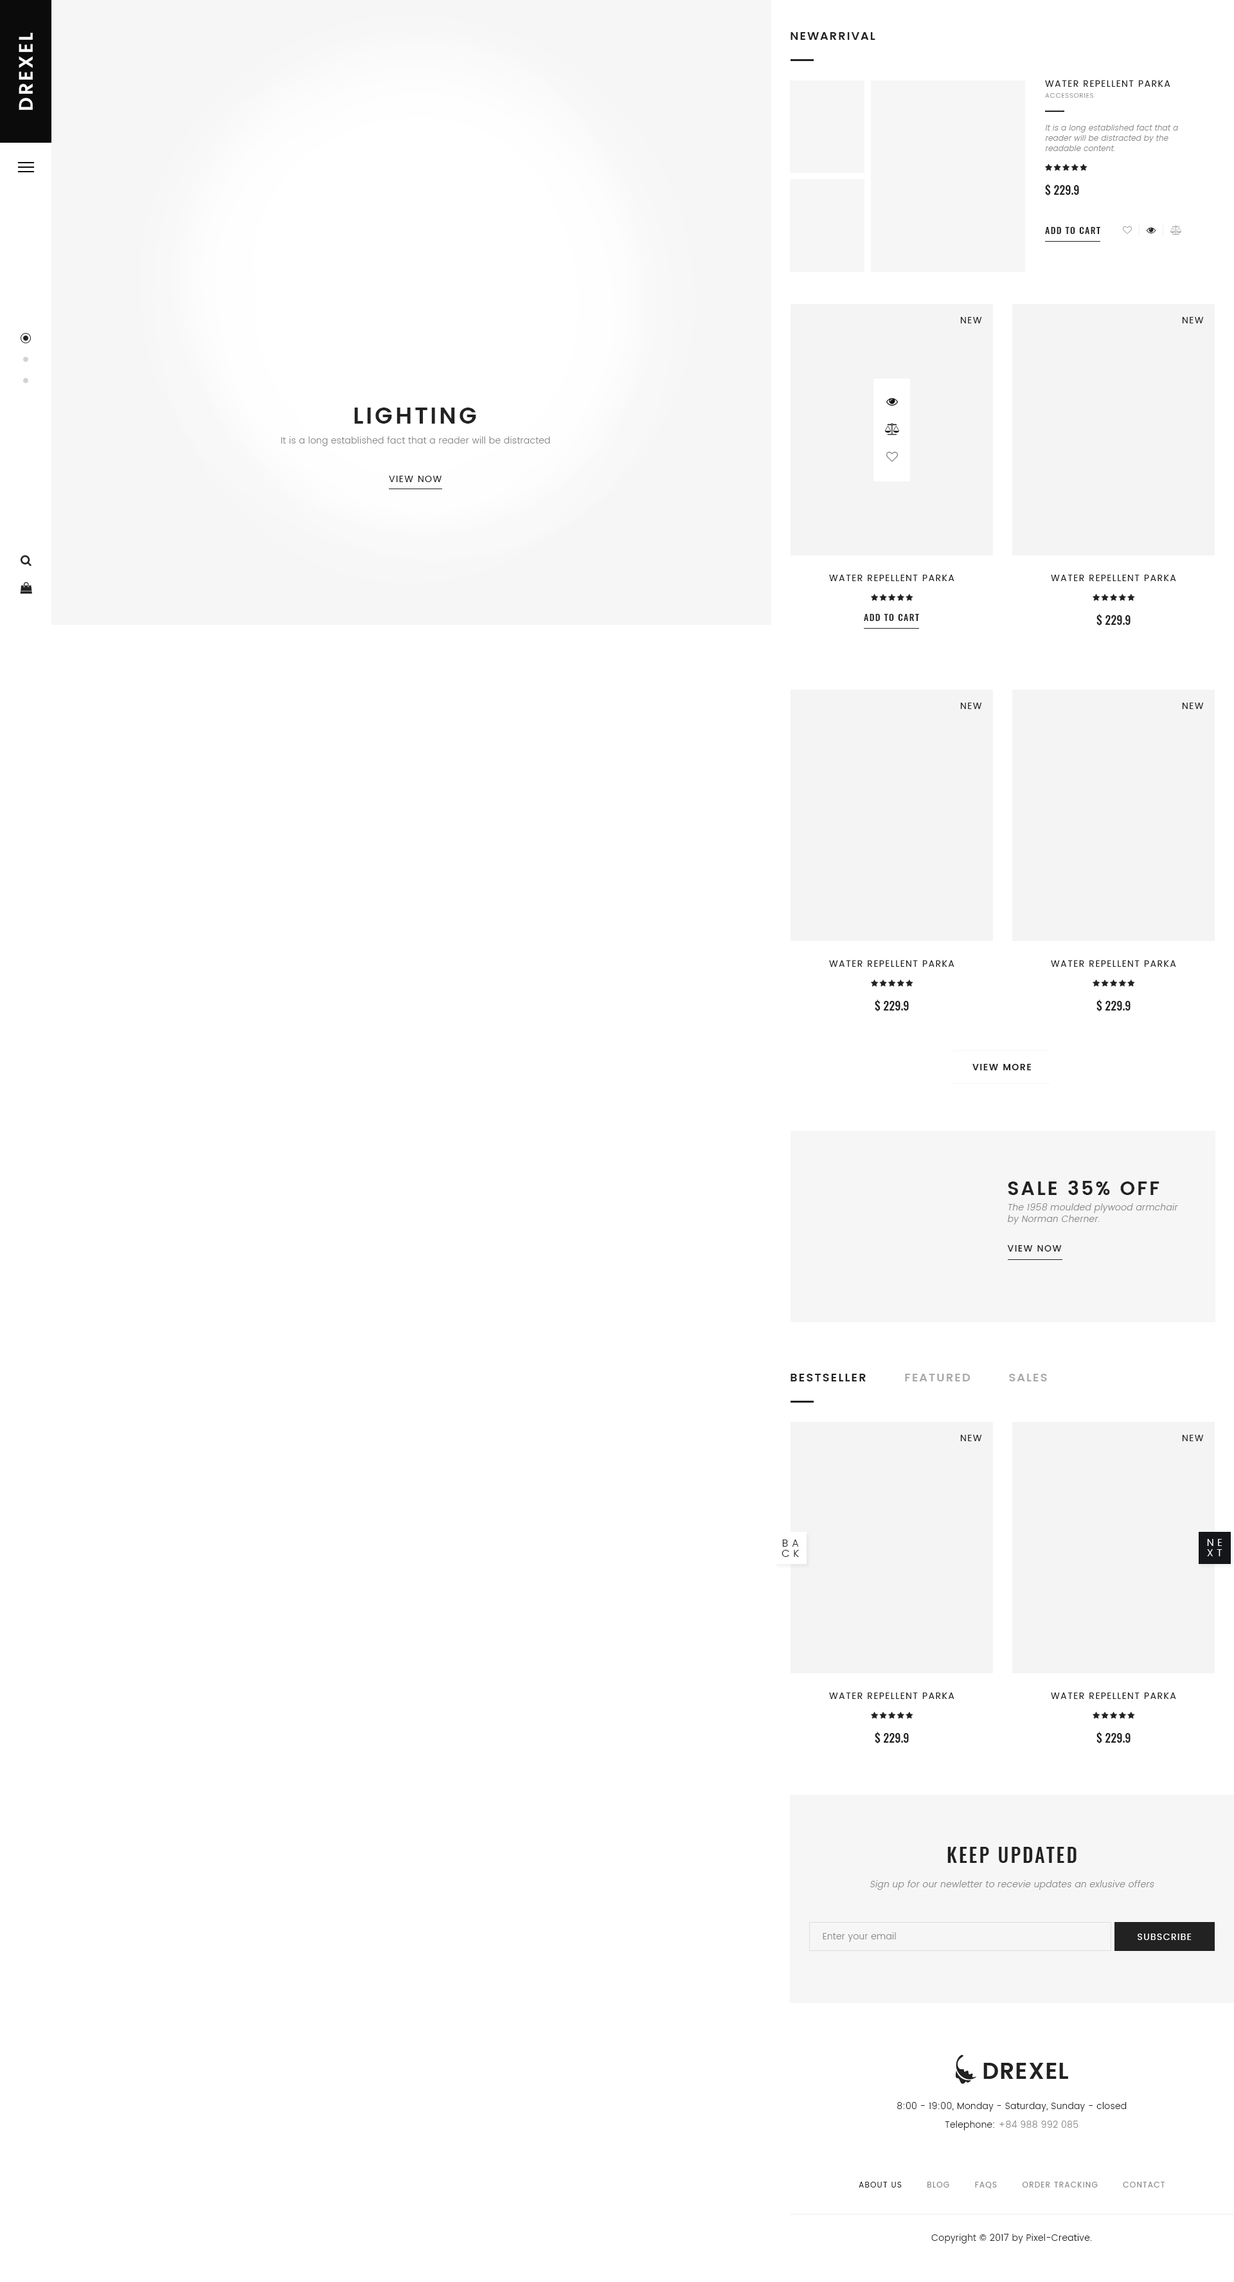
<style>
.page{position:relative;width:1234px;height:2282px;background:#ffffff}
.page>*{position:absolute;margin:0}
.t1{font:19.3px "Poppins-SemiBold";letter-spacing:0.1em;color:#ffffff;text-transform:uppercase}
.t2{font:11.6px "Poppins-SemiBold";letter-spacing:0.1em;color:#222222;text-transform:uppercase}
.t3{font:9px "Poppins-Regular";letter-spacing:0.1em;color:#222222;text-transform:uppercase}
.t4{font:6.4px "Poppins-Light";letter-spacing:0.1em;color:#888888;text-transform:uppercase}
.t5{font:7.7px/10.3px "Poppins-Light";letter-spacing:0.025em;color:#888888;font-style:italic}
.t6{font:11.6px "Oswald-Medium";color:#222222}
.t7{font:9px "Oswald-Medium";letter-spacing:0.1em;color:#222222;text-transform:uppercase}
.t8{font:23.1px "Poppins-SemiBold";letter-spacing:0.1em;color:#222222;text-transform:uppercase}
.t9{font:9px "Poppins-Light";letter-spacing:0.025em;color:#888888}
.t10{font:9px "Poppins-SemiBold";letter-spacing:0.1em;color:#222222;text-transform:uppercase}
.t11{font:19.3px "Poppins-SemiBold";letter-spacing:0.1em;color:#222222;text-transform:uppercase}
.t12{font:9px/11.6px "Poppins-Light";letter-spacing:0.025em;color:#888888;font-style:italic}
.t13{font:9px "Poppins-Medium";letter-spacing:0.1em;color:#222222;text-transform:uppercase}
.t14{font:11.6px "Poppins-SemiBold";letter-spacing:0.1em;color:#aaaaaa;text-transform:uppercase}
.t15{font:10.3px/10.3px "Poppins-Light";letter-spacing:0.35em;color:#222222;text-transform:uppercase}
.t16{font:10.3px/10.3px "Poppins-Light";letter-spacing:0.35em;color:#ffffff;text-transform:uppercase}
.t17{font:19.3px "Oswald-Medium";letter-spacing:0.1em;color:#222222}
.t18{font:9px "Poppins-Light";letter-spacing:0.025em;color:#888888;font-style:italic}
.t19{font:9px "Poppins-Regular";letter-spacing:0.1em;color:#ffffff;text-transform:uppercase}
.t20{font:9px "Poppins-Light";letter-spacing:0.025em;color:#222222}
.t21{font:7.7px "Poppins-Regular";letter-spacing:0.1em;color:#888888;text-transform:uppercase}
.t22{font:7.7px "Poppins-Regular";letter-spacing:0.1em;color:#222222;text-transform:uppercase}
</style>
<div class="page">
<p class="t1" style="left:19px;top:33px;width:14px;height:77px;rotate:-90deg">Drexel</p>
<p class="t2" style="left:791px;top:32px;width:85px;height:8px">Newarrival</p>
<p class="t3" style="left:1045px;top:80px;width:126px;height:7px">Water Repellent Parka</p>
<p class="t4" style="left:1045px;top:93px;width:49px;height:5px">Accessories</p>
<p class="t5" style="left:1045px;top:125px;width:133px;height:26px">It is a long established fact that a reader will be distracted by the readable content.</p>
<p class="t6" style="left:1045px;top:184px;width:34px;height:12px">$ 229.9</p>
<p class="t7" style="left:1045px;top:227px;width:56px;height:7px">Add to cart</p>
<p class="t3" style="left:960px;top:317px;width:22px;height:6px">nEW</p>
<p class="t3" style="left:1182px;top:317px;width:22px;height:6px">nEW</p>
<p class="t8" style="left:354px;top:408px;width:122px;height:16px">Lighting</p>
<p class="t9" style="left:281px;top:437px;width:269px;height:9px">It is a long established fact that a reader will be distracted</p>
<p class="t3" style="left:389px;top:476px;width:53px;height:6px">View now</p>
<p class="t3" style="left:829px;top:575px;width:126px;height:6px">Water Repellent Parka</p>
<p class="t3" style="left:1051px;top:575px;width:125px;height:6px">Water Repellent Parka</p>
<p class="t7" style="left:864px;top:614px;width:55px;height:7px">Add to cart</p>
<p class="t6" style="left:1097px;top:614px;width:34px;height:12px">$ 229.9</p>
<p class="t3" style="left:960px;top:703px;width:22px;height:6px">nEW</p>
<p class="t3" style="left:1182px;top:703px;width:22px;height:6px">nEW</p>
<p class="t3" style="left:829px;top:960px;width:126px;height:7px">Water Repellent Parka</p>
<p class="t3" style="left:1051px;top:960px;width:125px;height:7px">Water Repellent Parka</p>
<p class="t6" style="left:875px;top:1000px;width:34px;height:12px">$ 229.9</p>
<p class="t6" style="left:1097px;top:1000px;width:34px;height:12px">$ 229.9</p>
<p class="t10" style="left:973px;top:1064px;width:59px;height:6px">View more</p>
<p class="t11" style="left:1008px;top:1180px;width:152px;height:15px">Sale 35% off</p>
<p class="t12" style="left:1007px;top:1203px;width:171px;height:22px">The 1958 moulded plywood armchair<br>by Norman Cherner.</p>
<p class="t13" style="left:1007px;top:1245px;width:55px;height:7px">View now</p>
<p class="t14" style="left:791px;top:1374px;width:256px;height:8px"><span class="t2">Bestseller</span>        Featured        Sales</p>
<p class="t3" style="left:960px;top:1435px;width:22px;height:6px">nEW</p>
<p class="t3" style="left:1182px;top:1435px;width:22px;height:6px">nEW</p>
<p class="t15" style="left:782px;top:1540px;width:17px;height:17px;text-align:center">Ba<br>ck</p>
<p class="t16" style="left:1207px;top:1539px;width:16px;height:17px;text-align:center">ne<br>xt</p>
<p class="t3" style="left:829px;top:1693px;width:126px;height:6px">Water Repellent Parka</p>
<p class="t3" style="left:1051px;top:1693px;width:125px;height:6px">Water Repellent Parka</p>
<p class="t6" style="left:875px;top:1732px;width:34px;height:12px">$ 229.9</p>
<p class="t6" style="left:1097px;top:1732px;width:34px;height:12px">$ 229.9</p>
<p class="t17" style="left:948px;top:1847px;width:129px;height:16px">KEEP UPDATED</p>
<p class="t18" style="left:870px;top:1880px;width:285px;height:10px">Sign up for our newletter to recevie updates an exlusive offers</p>
<p class="t9" style="left:823px;top:1932px;width:73px;height:10px">Enter your email</p>
<p class="t19" style="left:1138px;top:1934px;width:54px;height:6px">Subscribe</p>
<p class="t20" style="left:897px;top:2102px;width:230px;height:10px">8:00 - 19:00, Monday - Saturday, Sunday - closed</p>
<p class="t9" style="left:945px;top:2121px;width:134px;height:9px"><span class="t20">Telephone: </span>+84 988 992 085</p>
<p class="t21" style="left:859px;top:2182px;width:306px;height:7px"><span class="t22">About Us</span>        Blog        FAQs        Order Tracking        Contact</p>
<p class="t20" style="left:932px;top:2234px;width:160px;height:10px">Copyright © 2017 by Pixel-Creative.</p>
</div>
